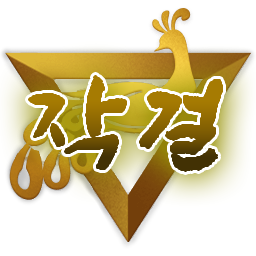
<style>
.page{position:relative;width:256px;height:256px;background:#ffffff}
.page>*{position:absolute;margin:0}
.t1{font:120.8px "SangSangRockOTF";letter-spacing:0.1em;scale:0.93 1}
.t2{font:114.8px "SangSangRockOTF";letter-spacing:0.12em;scale:0.93 1}
</style>
<div class="page">
<p class="t1" style="left:29px;top:76px;width:193px;height:95px">작<span class="t2">걸</span></p>
</div>
